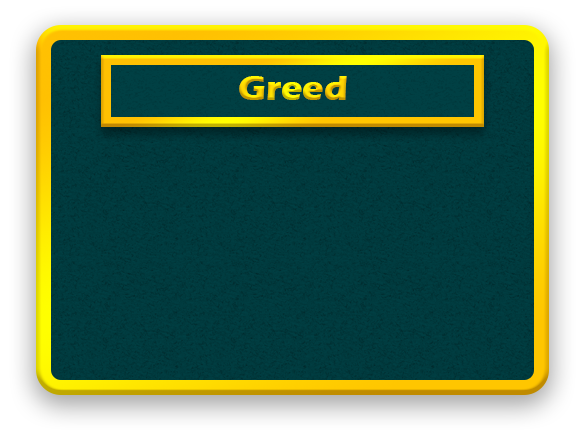
<style>
.page{position:relative;width:576px;height:433px}
.page>*{position:absolute;margin:0}
.t1{font:36px "ErasITC-Bold"}
</style>
<div class="page">
<p class="t1" style="left:239px;top:76px;width:108px;height:24px">Greed</p>
</div>
